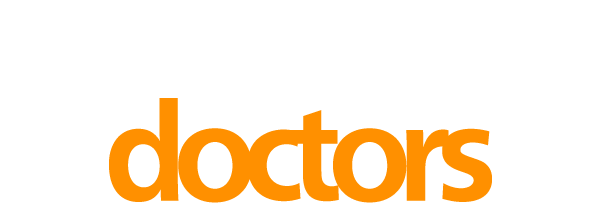
<style>
.page{position:relative;width:590px;height:203px;background:#ffffff}
.page>*{position:absolute;margin:0}
.t1{font:142.3px "CartoGothicStd-Bold";letter-spacing:-0.1em;color:#ff9000}
</style>
<div class="page">
<p class="t1" style="left:109px;top:98px;width:383px;height:105px">doctors</p>
</div>
